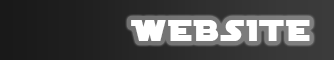
<style>
.page{position:relative;width:334px;height:60px}
.page>*{position:absolute;margin:0}
.t1{font:31px "SFDistantGalaxyAlternate";letter-spacing:0.12em;color:#ffffff}
</style>
<div class="page">
<p class="t1" style="left:131px;top:20px;width:179px;height:21px">WEBSITE</p>
</div>
